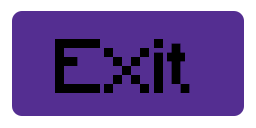
<style>
.page{position:relative;width:256px;height:128px;background:#542e91}
.page>*{position:absolute;margin:0}
.t1{font:72px "Minecraft";color:#000000}
</style>
<div class="page">
<p class="t1" style="left:55px;top:39px;width:135px;height:54px">Exit</p>
</div>
